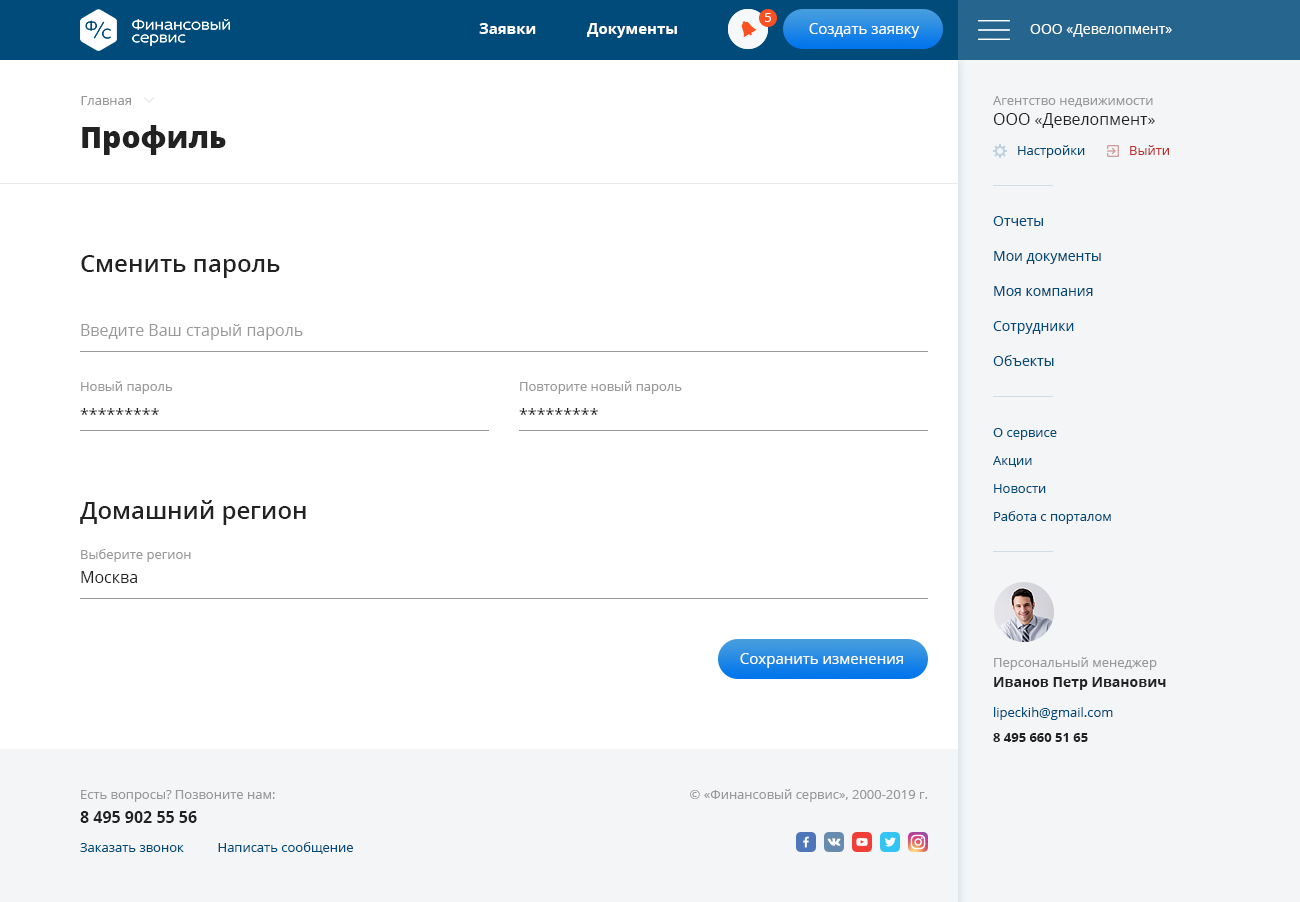
<style>
.page{position:relative;width:1300px;height:902px;background:#ffffff}
.page>*{position:absolute;margin:0}
.t1{font:13px "OpenSans";color:#ffffff}
.t2{font:15px "OpenSans-Bold";color:#ffffff}
.t3{font:15px "OpenSans";color:#ffffff}
.t4{font:14px "OpenSans";color:#ffffff}
.t5{font:13px "OpenSans";color:#999999}
.t6{font:16px/20px "OpenSans";color:#222222}
.t7{font:30px "OpenSans-Extrabold";color:#222222}
.t8{font:13px "OpenSans";color:#004b7a}
.t9{font:13px "OpenSans";color:#be3030}
.t10{font:14px/35px "OpenSans";color:#004b7a}
.t11{font:24px "OpenSans-Semibold";color:#222222}
.t12{font:16px "OpenSans";color:#999999}
.t13{font:16px/30px "OpenSans";color:#222222}
.t14{font:13px/28px "OpenSans";color:#004b7a}
.t15{font:16px/24px "OpenSans";color:#222222}
.t16{font:14px/20px "OpenSans-Bold";color:#222222}
.t17{font:13px "OpenSans-Bold";color:#222222}
.t18{font:13px/24px "OpenSans";color:#999999}
.t19{font:16px/24px "OpenSans-Bold";color:#222222}
</style>
<div class="page">
<p class="t1" style="left:765px;top:13px;width:6px;height:9px">5</p>
<p class="t2" style="left:479px;top:23px;width:198px;height:15px">Заявки             Документы</p>
<p class="t3" style="left:809px;top:23px;width:111px;height:15px">Создать заявку</p>
<p class="t4" style="left:1030px;top:24px;width:142px;height:13px">ООО «Девелопмент»</p>
<p class="t5" style="left:81px;top:96px;width:50px;height:9px">Главная</p>
<p class="t5" style="left:993px;top:96px;width:162px;height:32px">Агентство недвижимости<br><span class="t6">ООО «Девелопмент»</span></p>
<p class="t7" style="left:82px;top:125px;width:144px;height:30px">Профиль</p>
<p class="t8" style="left:1018px;top:145px;width:151px;height:13px">Настройки             <span class="t9">Выйти</span></p>
<p class="t10" style="left:993px;top:216px;width:108px;height:150px">Отчеты<br>Мои документы<br>Моя компания<br>Сотрудники<br>Объекты</p>
<p class="t11" style="left:81px;top:255px;width:199px;height:23px">Сменить пароль</p>
<p class="t12" style="left:81px;top:324px;width:222px;height:16px"><span class="t5"> <br></span>Введите Ваш старый пароль</p>
<p class="t5" style="left:80px;top:381px;width:93px;height:34px">Новый пароль<br><span class="t13">*********</span></p>
<p class="t5" style="left:519px;top:381px;width:163px;height:34px">Повторите новый пароль<br><span class="t13">*********</span></p>
<p class="t14" style="left:993px;top:428px;width:118px;height:96px">О сервисе<br>Акции<br>Новости<br>Работа с порталом</p>
<p class="t11" style="left:80px;top:500px;width:226px;height:25px">Домашний регион</p>
<p class="t5" style="left:81px;top:549px;width:110px;height:34px">Выберите регион<br><span class="t15">Москва</span></p>
<p class="t3" style="left:740px;top:653px;width:163px;height:15px">Сохранить изменения</p>
<p class="t5" style="left:994px;top:657px;width:172px;height:33px">Персональный менеджер<br><span class="t16">Иванов Петр Иванович</span></p>
<p class="t8" style="left:994px;top:707px;width:119px;height:13px">lipeckih@gmail.com</p>
<p class="t17" style="left:993px;top:733px;width:95px;height:9px">8 495 660 51 65</p>
<p class="t18" style="left:80px;top:790px;width:195px;height:33px">Есть вопросы? Позвоните нам:<br><span class="t19">8 495 902 55 56</span></p>
<p class="t5" style="left:690px;top:789px;width:238px;height:13px">© «Финансовый сервис», 2000-2019 г.</p>
<p class="t8" style="left:80px;top:842px;width:273px;height:12px">Заказать звонок          Написать сообщение</p>
</div>
